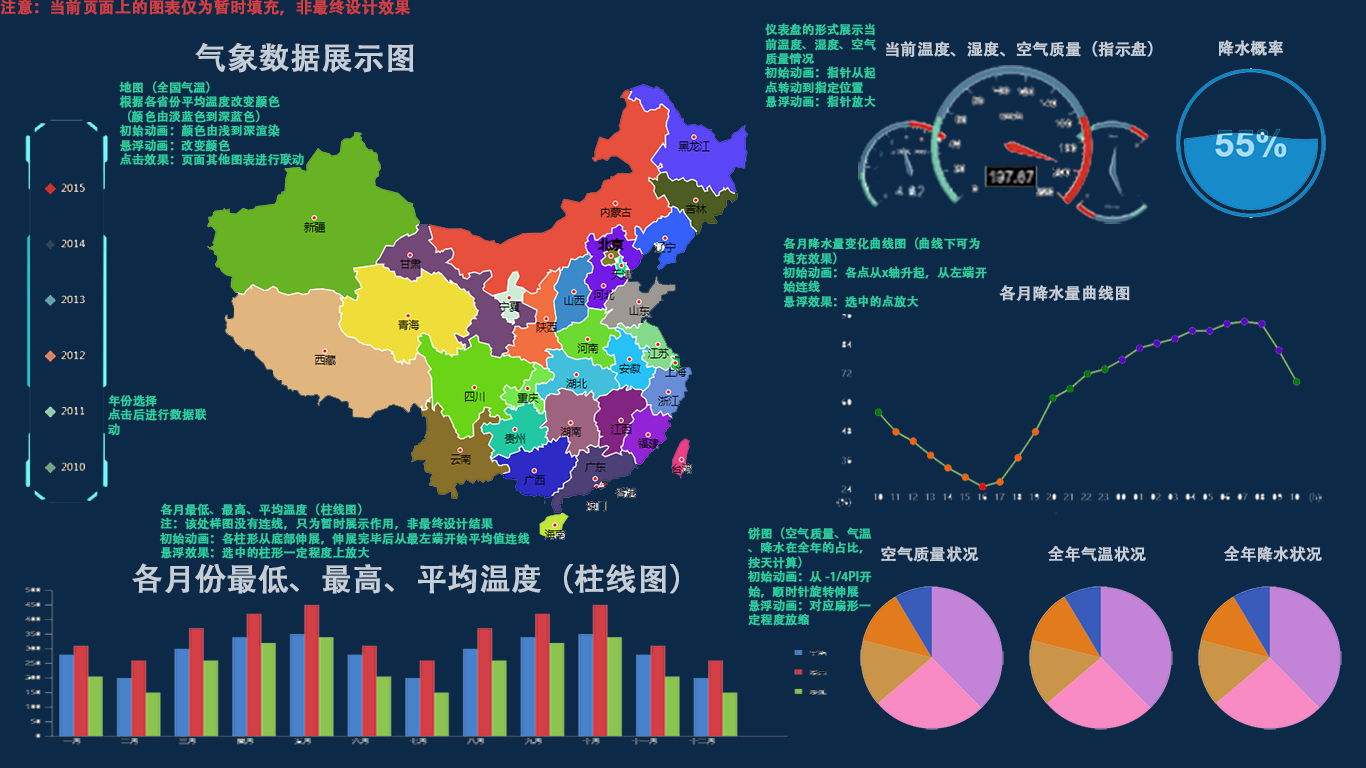
<style>
.page{position:relative;width:1366px;height:768px;background:#0c2947}
.page>*{position:absolute;margin:0}
.t1{font:16px "AdobeHeitiStd-Regular";color:#d53f42;font-weight:bold}
.t2{font:12px "AdobeHeitiStd-Regular";color:#2dcb9d;font-weight:bold}
.t3{font:16px "AdobeHeitiStd-Regular";color:#c5cdd7;font-weight:bold}
.t4{font:30.8px "AdobeHeitiStd-Regular";color:#c5cdd7;font-weight:bold}
</style>
<div class="page">
<p class="t1" style="left:0px;top:0px;width:410px;height:16px">注意：当前页面上的图表仅为暂时填充，非最终设计效果</p>
<p class="t2" style="left:765px;top:23px;width:111px;height:85px">仪表盘的形式展示当前温度、湿度、空气质量情况<br>初始动画：指针从起点转动到指定位置<br>悬浮动画：指针放大</p>
<p class="t3" style="left:886px;top:41px;width:267px;height:16px">当前温度、湿度、空气质量（指示盘）</p>
<p class="t3" style="left:1218px;top:40px;width:65px;height:16px">降水概率</p>
<p class="t4" style="left:195px;top:43px;width:219px;height:30px">气象数据展示图</p>
<p class="t2" style="left:119px;top:81px;width:185px;height:85px">地图（全国气温）<br>根据各省份平均温度改变颜色<br>（颜色由淡蓝色到深蓝色）<br>初始动画：颜色由浅到深渲染<br>悬浮动画：改变颜色<br>点击效果：页面其他图表进行联动</p>
<p class="t2" style="left:783px;top:237px;width:204px;height:71px">各月降水量变化曲线图（曲线下可为填充效果）<br>初始动画：各点从x轴升起，从左端开始连线<br>悬浮效果：选中的点放大</p>
<p class="t3" style="left:999px;top:285px;width:131px;height:16px">各月降水量曲线图</p>
<p class="t2" style="left:108px;top:395px;width:99px;height:41px">年份选择<br>点击后进行数据联动</p>
<p class="t2" style="left:159px;top:503px;width:371px;height:56px">各月最低、最高、平均温度（柱线图）<br>注：该处样图没有连线，只为暂时展示作用，非最终设计结果<br>初始动画：各柱形从底部伸展，伸展完毕后从最左端开始平均值连线<br>悬浮效果：选中的柱形一定程度上放大</p>
<p class="t2" style="left:748px;top:527px;width:124px;height:99px">饼图（空气质量、气温、降水在全年的占比，按天计算）<br>初始动画：从 -1/4PI开始，顺时针旋转伸展<br>悬浮动画：对应扇形一定程度放缩</p>
<p class="t3" style="left:1048px;top:545px;width:98px;height:17px">全年气温状况</p>
<p class="t3" style="left:1224px;top:545px;width:98px;height:17px">全年降水状况</p>
<p class="t3" style="left:881px;top:546px;width:98px;height:16px">空气质量状况</p>
<p class="t4" style="left:132px;top:563px;width:547px;height:31px">各月份最低、最高、平均温度（柱线图）</p>
</div>
